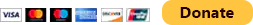
<style>
.page{position:relative;width:253px;height:25px;background:#ffffff}
.page>*{position:absolute;margin:0}
.t1{font:16px "KhmerUI-Bold";color:#270000}
</style>
<div class="page">
<p class="t1" style="left:180px;top:7px;width:54px;height:11px">Donate</p>
</div>
